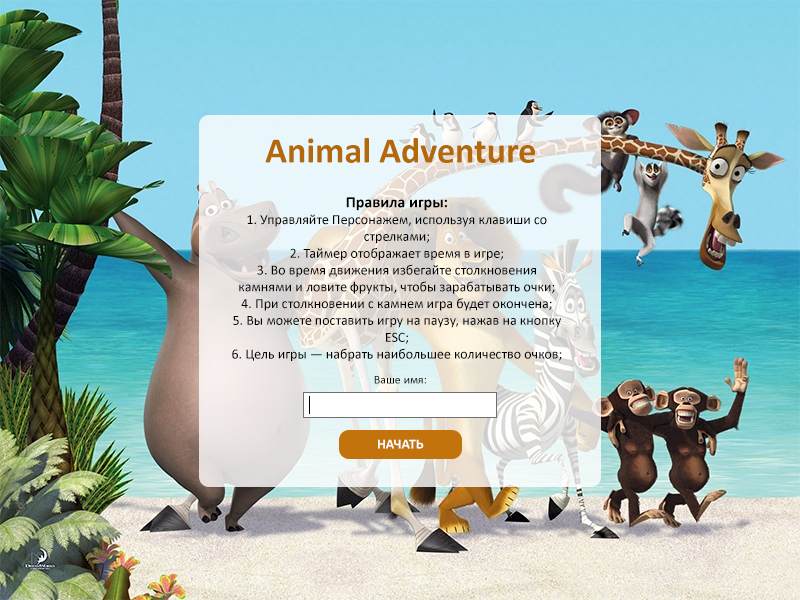
<style>
.page{position:relative;width:800px;height:600px}
.page>*{position:absolute;margin:0}
.t1{font:36px "Calibri-Bold";color:#b3690a}
.t2{font:14px "Calibri";color:#000000}
.t3{font:16px "Calibri-Bold";color:#000000}
.t4{font:12px "Calibri";color:#000000}
.t5{font:14px "Calibri-Bold";color:#ffffff}
</style>
<div class="page">
<p class="t1" style="left:265px;top:138px;width:270px;height:25px">Animal Adventure</p>
<p class="t2" style="left:232px;top:197px;width:330px;height:164px;text-align:center"><span class="t3">Правила игры:<br></span>1. Управляйте Персонажем, используя клавиши со стрелками;<br>2. Таймер отображает время в игре;<br>3. Во время движения избегайте столкновения камнями и ловите фрукты, чтобы зарабатывать очки;<br>4. При столкновении с камнем игра будет окончена;<br>5. Вы можете поставить игру на паузу, нажав на кнопку ESC;<br>6. Цель игры — набрать наибольшее количество очков;</p>
<p class="t4" style="left:374px;top:376px;width:52px;height:8px">Ваше имя:</p>
<p class="t5" style="left:378px;top:439px;width:46px;height:10px">НАЧАТЬ</p>
</div>
